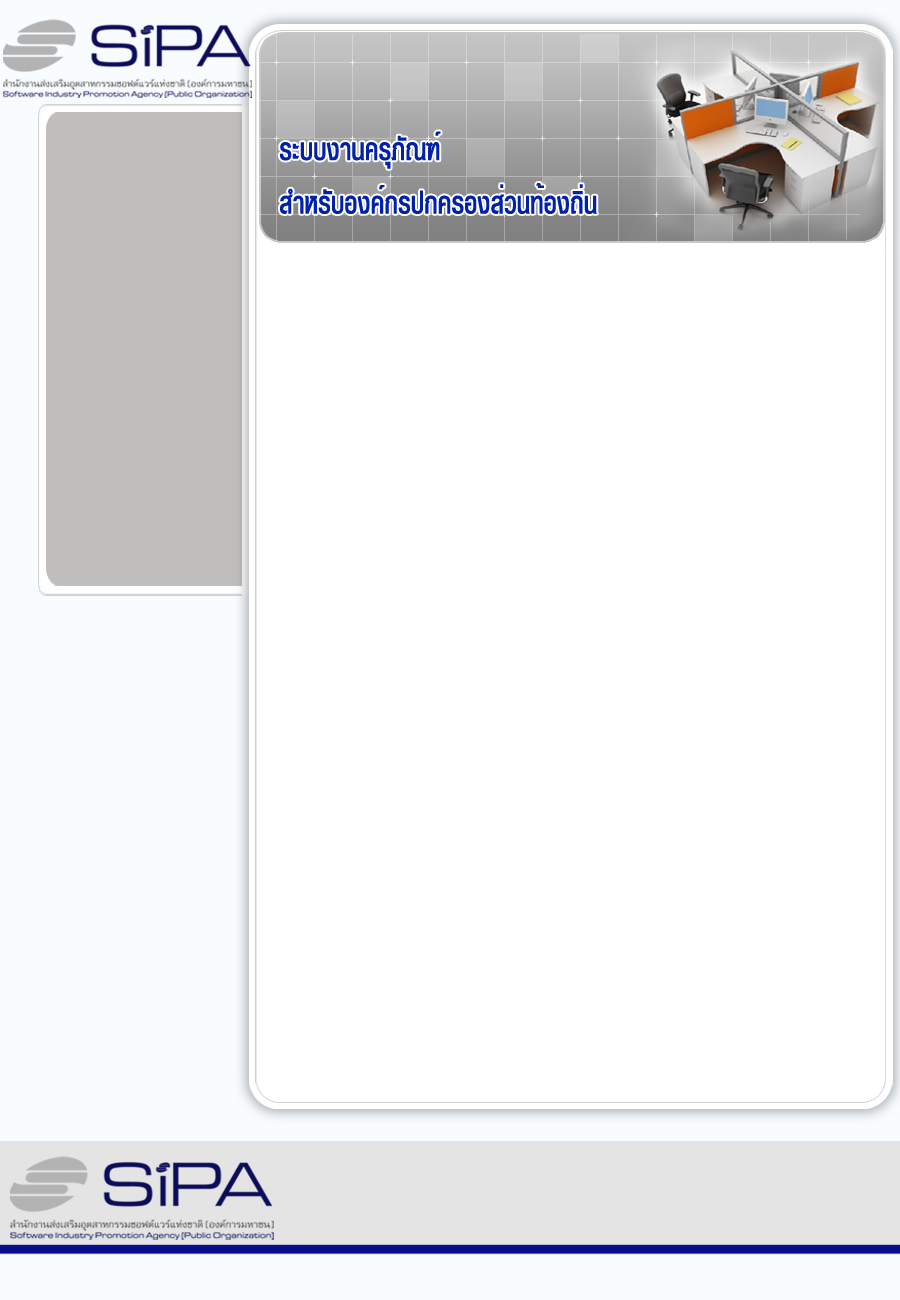
<style>
.page{position:relative;width:900px;height:1300px;background:#ffffff}
.page>*{position:absolute;margin:0}
.t1{font:44.6px "PSLDisplaySP";letter-spacing:0.005em;color:#0121ab;scale:0.79 1}
</style>
<div class="page">
<p class="t1" style="left:279px;top:131px;width:318px;height:83px">ระบบงานครุภัณฑ์<br>สำหรับองค์กรปกครองส่วนท้องถิ่น</p>
</div>
